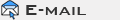
<style>
.page{position:relative;width:120px;height:20px;background:#f1f0f0}
.page>*{position:absolute;margin:0}
.t1{font:18.7px "BankGothicBT-Medium";color:#333333}
</style>
<div class="page">
<p class="t1" style="left:26px;top:5px;width:60px;height:10px">E-mail</p>
</div>
